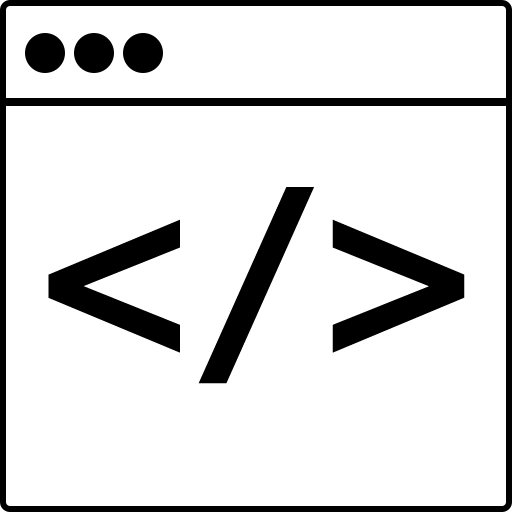
<style>
.page{position:relative;width:512px;height:512px;background:#ffffff}
.page>*{position:absolute;margin:0}
.t1{font:241.7px "BernardMT-Condensed";color:#000000}
</style>
<div class="page">
<p class="t1" style="left:48px;top:187px;width:417px;height:197px">&lt;/&gt;</p>
</div>
